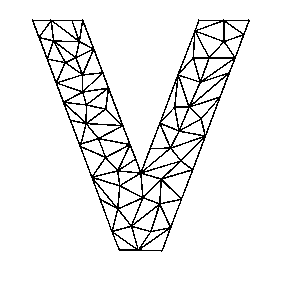
<style>
.page{position:relative;width:283px;height:283px;background:#ffffff}
.page>*{position:absolute;margin:0}
.t1{font:300px "Aroly";letter-spacing:-0.01em;color:#000000}
</style>
<div class="page">
<p class="t1" style="left:32px;top:19px;width:218px;height:233px">V</p>
</div>
